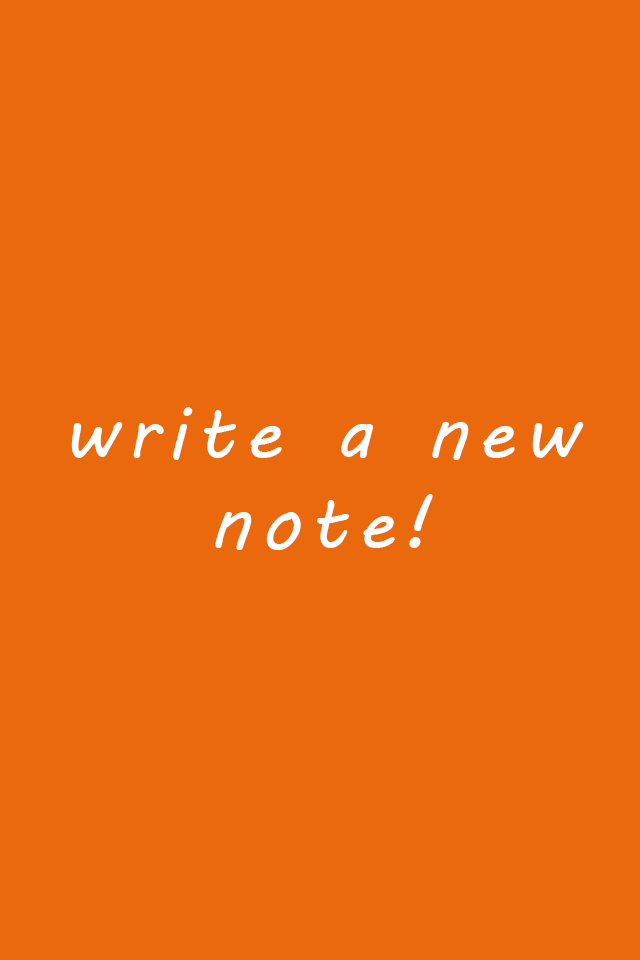
<style>
.page{position:relative;width:640px;height:960px;background:#ea690d}
.page>*{position:absolute;margin:0}
.t1{font:75px "MVBoli";letter-spacing:0.12em;color:#ffffff}
</style>
<div class="page">
<p class="t1" style="left:71px;top:407px;width:513px;height:143px;text-align:center">write a new note!</p>
</div>
